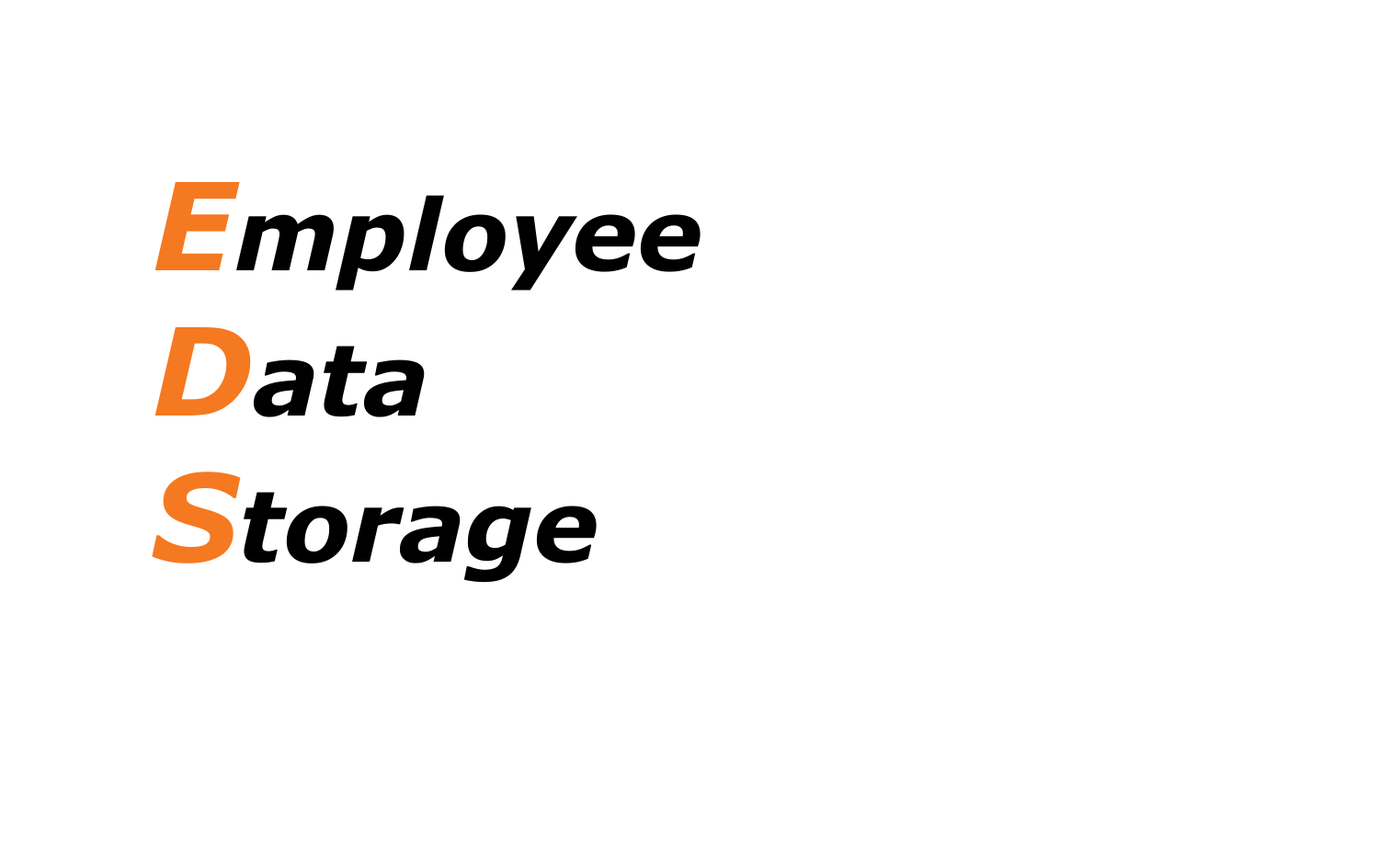
<style>
.page{position:relative;width:1379px;height:865px;background:#ffffff}
.page>*{position:absolute;margin:0}
.t1{font:98.2px "Verdana-BoldItalic";color:#000000}
.t2{font:121.6px "Verdana-BoldItalic";color:#f57921}
</style>
<div class="page">
<p class="t1" style="left:152px;top:182px;width:548px;height:401px"><span class="t2">E</span>mployee<br><span class="t2">D</span>ata<br><span class="t2">S</span>torage</p>
</div>
